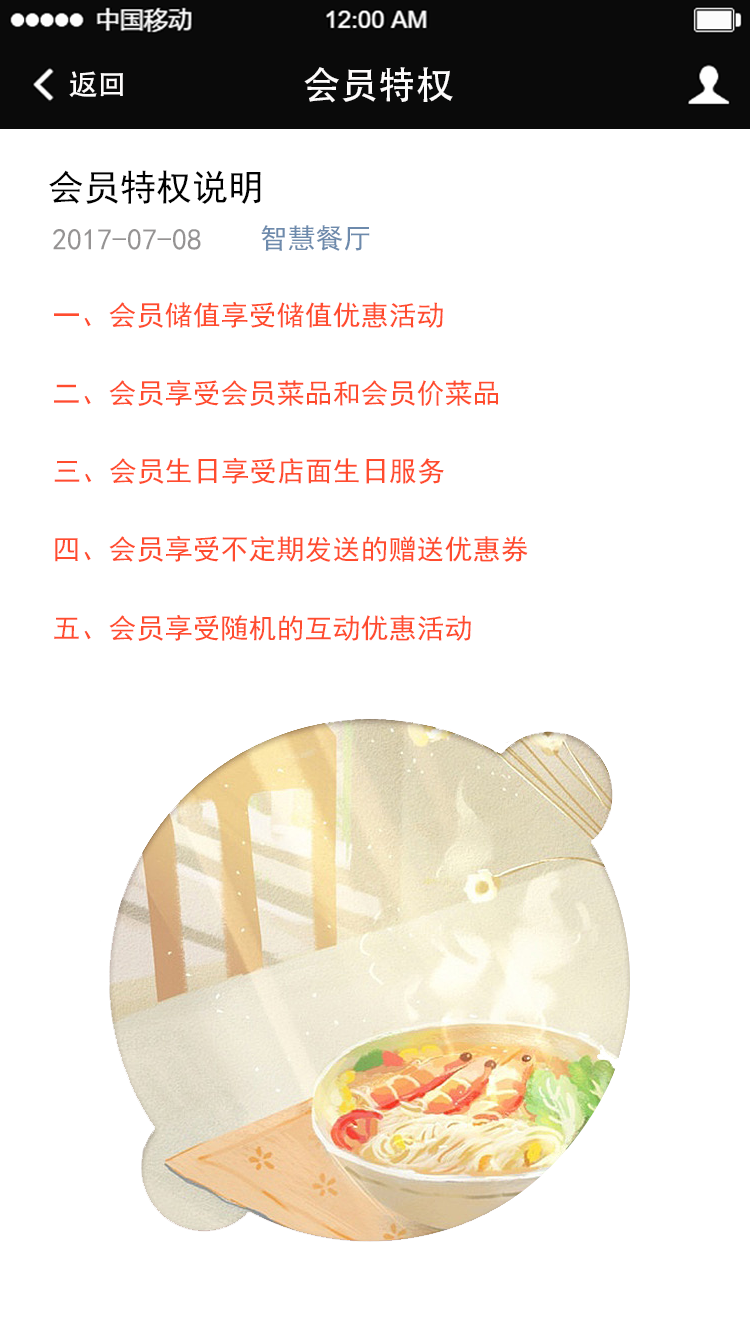
<style>
.page{position:relative;width:750px;height:1334px;background:#ffffff}
.page>*{position:absolute;margin:0}
.t1{font:29.2px "AdobeHeitiStd-Regular";color:#fdfbfb}
.t2{font:37.5px "AdobeHeitiStd-Regular";color:#fdfbfb}
.t3{font:36px "SimHei";color:#010101}
.t4{font:30px "SimHei";color:#959393}
.t5{font:28px "SimHei";color:#6d8aac}
.t6{font:28px "SimHei";color:#ff4c2e}
</style>
<div class="page">
<p class="t1" style="left:69px;top:71px;width:54px;height:26px">返回</p>
<p class="t2" style="left:304px;top:67px;width:149px;height:36px">会员特权</p>
<p class="t3" style="left:49px;top:170px;width:212px;height:34px">会员特权说明</p>
<p class="t4" style="left:53px;top:229px;width:148px;height:21px">2017-07-08</p>
<p class="t5" style="left:261px;top:225px;width:109px;height:26px">智慧餐厅</p>
<p class="t6" style="left:54px;top:301px;width:389px;height:27px">一、会员储值享受储值优惠活动</p>
<p class="t6" style="left:54px;top:379px;width:444px;height:27px">二、会员享受会员菜品和会员价菜品</p>
<p class="t6" style="left:54px;top:457px;width:390px;height:27px">三、会员生日享受店面生日服务</p>
<p class="t6" style="left:55px;top:535px;width:473px;height:27px">四、会员享受不定期发送的赠送优惠券</p>
<p class="t6" style="left:54px;top:614px;width:417px;height:27px">五、会员享受随机的互动优惠活动</p>
</div>
